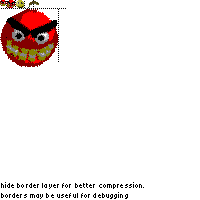
<style>
.page{position:relative;width:200px;height:200px;background:#ffffff}
.page>*{position:absolute;margin:0}
.t1{font:8.3px "Tiny5-Regular";color:#000000}
</style>
<div class="page">
<p class="t1" style="left:1px;top:182px;width:143px;height:17px">hide border layer for better compression.<br>borders may be useful for debugging</p>
</div>
